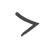
<style>
.page{position:relative;width:50px;height:50px;background:#ffffff}
.page>*{position:absolute;margin:0}
.t1{font:90px "Hashtag";color:#474747}
</style>
<div class="page">
<p class="t1" style="left:15px;top:12px;width:25px;height:25px;rotate:180deg">&gt;</p>
</div>
